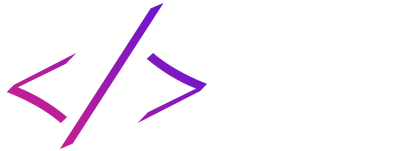
<style>
.page{position:relative;width:400px;height:151px;background:#ffffff}
.page>*{position:absolute;margin:0}
.t1{font:133.6px "Apple-Chancery"}
</style>
<div class="page">
<p class="t1" style="left:6px;top:3px;width:201px;height:146px">&lt;/&gt;</p>
</div>
